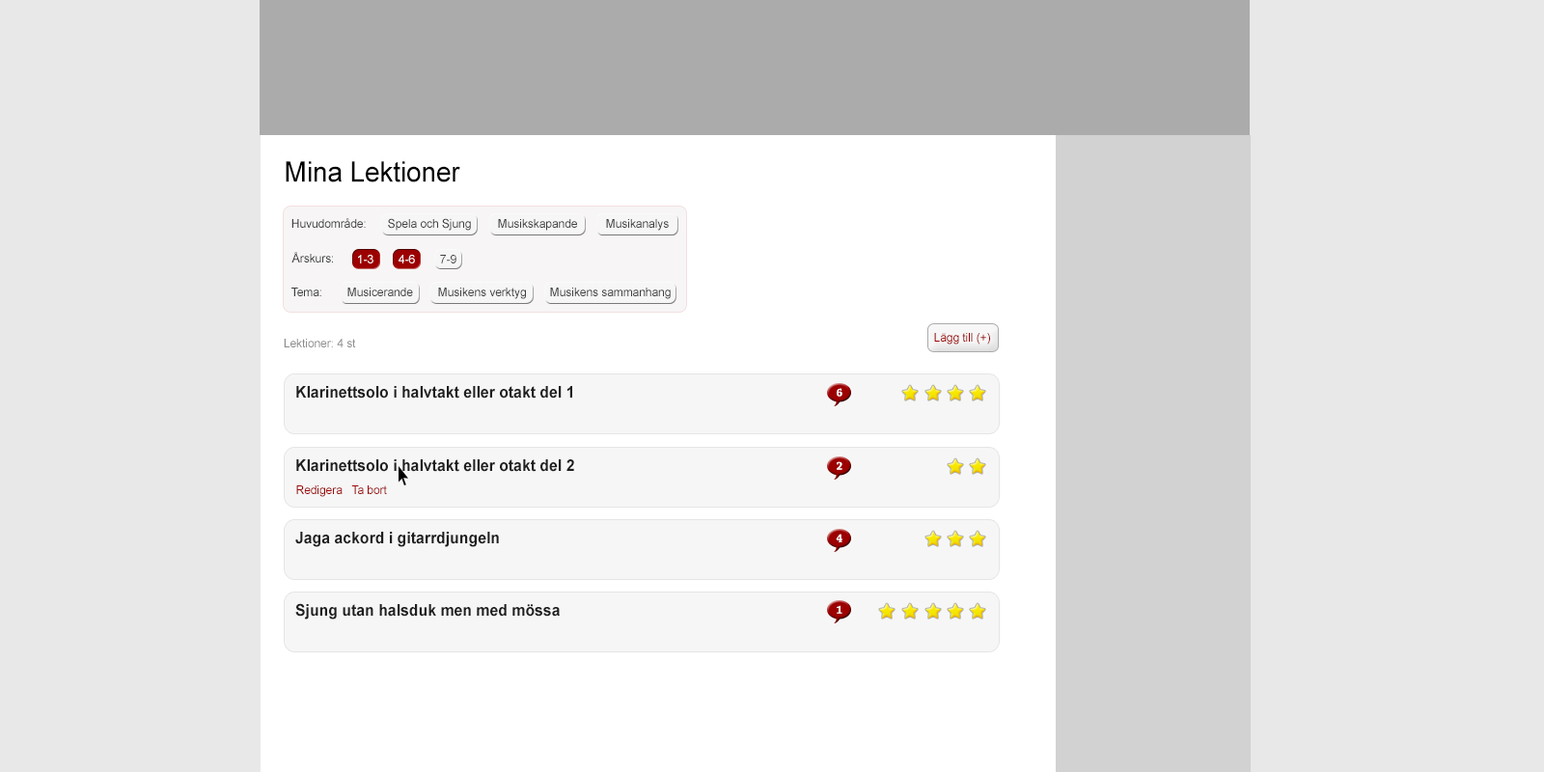
<style>
.page{position:relative;width:1544px;height:772px;background:#e8e8e8}
.page>*{position:absolute;margin:0}
.t1{font:28.2px "ArialMT";color:#000000;scale:0.95 1}
.t2{font:12.1px "ArialMT";color:#3e3e3e;scale:0.95 1}
.t3{font:12.1px "ArialMT";color:#ffffff;scale:0.95 1}
.t4{font:12.1px "ArialMT";color:#8e8d8d;scale:0.95 1}
.t5{font:12.1px "ArialMT";color:#9c0000;scale:0.95 1}
.t6{font:16.1px "Arial-BoldMT";color:#1f1f1f;scale:0.95 1}
.t7{font:12.1px "ChaparralPro-Bold";color:#ffffff;scale:0.95 1}
.t8{font:12.1px "ArialMT";color:#9e0909;scale:0.95 1}
</style>
<div class="page">
<p class="t1" style="left:286px;top:161px;width:174px;height:21px">Mina Lektioner</p>
<p class="t2" style="left:291px;top:218px;width:75px;height:10px">Huvudområde:</p>
<p class="t2" style="left:388px;top:218px;width:83px;height:13px">Spela och Sjung</p>
<p class="t2" style="left:498px;top:219px;width:79px;height:12px">Musikskapande</p>
<p class="t2" style="left:606px;top:219px;width:63px;height:12px">Musikanalys</p>
<p class="t2" style="left:291px;top:252px;width:42px;height:11px">Årskurs:</p>
<p class="t3" style="left:358px;top:255px;width:16px;height:8px">1-3</p>
<p class="t3" style="left:399px;top:255px;width:16px;height:8px">4-6</p>
<p class="t2" style="left:440px;top:255px;width:17px;height:8px">7-9</p>
<p class="t2" style="left:291px;top:288px;width:30px;height:8px">Tema:</p>
<p class="t2" style="left:347px;top:288px;width:66px;height:8px">Musicerande</p>
<p class="t2" style="left:438px;top:288px;width:88px;height:11px">Musikens verktyg</p>
<p class="t2" style="left:550px;top:288px;width:121px;height:11px">Musikens sammanhang</p>
<p class="t4" style="left:284px;top:339px;width:72px;height:8px">Lektioner: 4 st</p>
<p class="t5" style="left:934px;top:333px;width:56px;height:12px">Lägg till (+)</p>
<p class="t6" style="left:296px;top:386px;width:276px;height:13px">Klarinettsolo i halvtakt eller otakt del 1</p>
<p class="t7" style="left:837px;top:388px;width:6px;height:9px">6</p>
<p class="t6" style="left:296px;top:459px;width:278px;height:13px">Klarinettsolo i halvtakt eller otakt del 2</p>
<p class="t7" style="left:837px;top:461px;width:6px;height:9px">22</p>
<p class="t8" style="left:296px;top:485px;width:91px;height:12px">Redigera   Ta bort</p>
<p class="t6" style="left:295px;top:532px;width:204px;height:15px">Jaga ackord i gitarrdjungeln</p>
<p class="t7" style="left:836px;top:534px;width:7px;height:8px">4</p>
<p class="t6" style="left:295px;top:603px;width:265px;height:17px">Sjung utan halsduk men med mössa</p>
<p class="t7" style="left:837px;top:605px;width:6px;height:9px">1</p>
</div>
